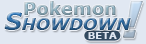
<style>
.page{position:relative;width:146px;height:44px;background:#e1e8f2}
.page>*{position:absolute;margin:0}
.t1{font:18px "Verdana-Bold"}
.t2{font:24px "Verdana-BoldItalic";font-variant:small-caps}
.t3{font:10px "Verdana-Bold";color:#e1e8f2;font-variant:small-caps}
</style>
<div class="page">
<p class="t1" style="left:24px;top:1px;width:92px;height:14px">Pokemon</p>
<p class="t2" style="left:4px;top:12px;width:127px;height:18px">Showdown</p>
<p class="t3" style="left:88px;top:32px;width:29px;height:7px">BETA</p>
</div>
